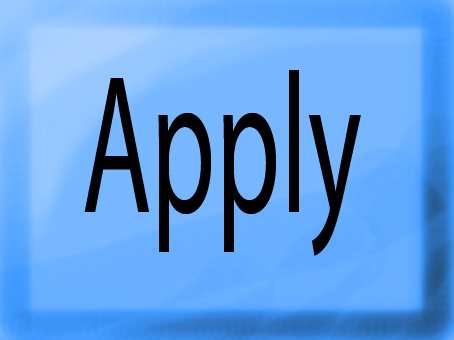
<style>
.page{position:relative;width:454px;height:340px}
.page>*{position:absolute;margin:0}
.t1{font:199.5px "MyriadPro-Regular";color:#000000;scale:0.57 1}
</style>
<div class="page">
<p class="t1" style="left:84px;top:70px;width:277px;height:186px">Apply</p>
</div>
